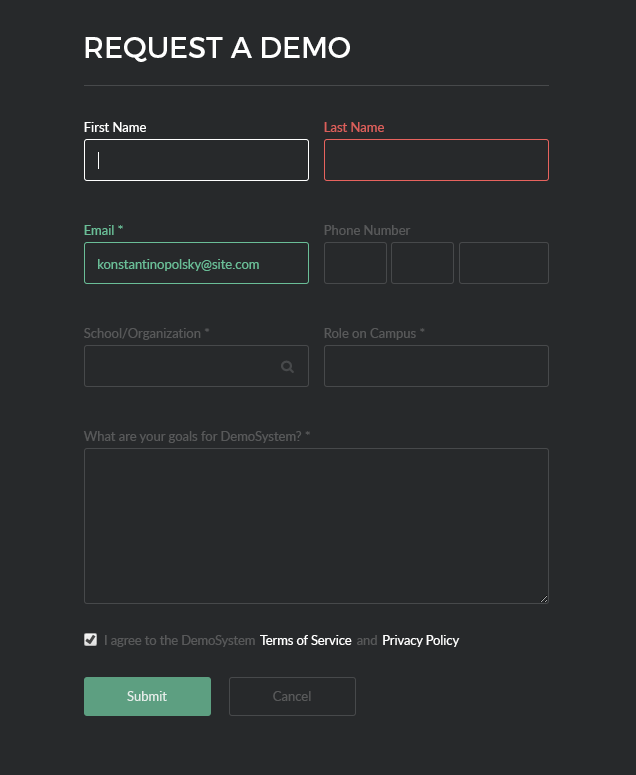
<style>
.page{position:relative;width:636px;height:775px;background:#27292b}
.page>*{position:absolute;margin:0}
.t1{font:29px "Montserrat-Regular";color:#ffffff;text-transform:uppercase}
.t2{font:13px "Lato-Regular";color:#ffffff}
.t3{font:13px "Lato-Regular";color:#da5f5b}
.t4{font:13px "Lato-Regular";color:#6abd97}
.t5{font:13px "Lato-Regular";color:#58595a}
.t6{font:13px "Lato-Regular";color:#e4ede9}
</style>
<div class="page">
<p class="t1" style="left:85px;top:37px;width:265px;height:25px">Request a demo</p>
<p class="t2" style="left:84px;top:122px;width:62px;height:10px">First Name</p>
<p class="t3" style="left:324px;top:122px;width:60px;height:10px">Last Name</p>
<p class="t4" style="left:84px;top:225px;width:39px;height:10px">Email *</p>
<p class="t5" style="left:324px;top:225px;width:87px;height:10px">Phone Number</p>
<p class="t4" style="left:98px;top:259px;width:161px;height:12px">konstantinopolsky@site.com</p>
<p class="t5" style="left:84px;top:328px;width:126px;height:12px">School/Organization *</p>
<p class="t5" style="left:324px;top:328px;width:101px;height:12px">Role on Campus *</p>
<p class="t5" style="left:83px;top:431px;width:227px;height:12px">What are your goals for DemoSystem? *</p>
<p class="t2" style="left:260px;top:635px;width:92px;height:10px">Terms of Service</p>
<p class="t2" style="left:383px;top:635px;width:77px;height:12px">Privacy Policy</p>
<p class="t6" style="left:127px;top:691px;width:40px;height:10px">Submit</p>
<p class="t5" style="left:273px;top:691px;width:38px;height:10px">Cancel</p>
</div>
